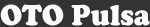
<style>
.page{position:relative;width:150px;height:27px;background:#333333}
.page>*{position:absolute;margin:0}
.t1{font:30px "CooperBlack";color:#fefcfa;scale:0.95 1}
</style>
<div class="page">
<p class="t1" style="left:0px;top:4px;width:150px;height:22px">OTO Pulsa</p>
</div>
